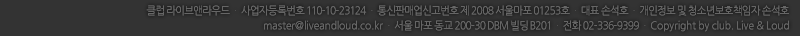
<style>
.page{position:relative;width:800px;height:36px;background:#333333}
.page>*{position:absolute;margin:0}
.t1{font:11px/15px "NanumGothic";letter-spacing:0.01em;color:#666666;scale:0.94 1}
.t2{font:11px/15px "NanumGothic";letter-spacing:-0.04em;color:#666666;scale:0.94 1}
.t3{font:11px/15px "NanumGothic";letter-spacing:-0.04em;color:#505050;scale:0.94 1}
</style>
<div class="page">
<p class="t1" style="left:146px;top:5px;width:643px;height:27px;text-align:right"><span class="t2">클럽 라이브앤라우드 </span><span class="t3">ㆍ </span><span class="t2">사업자등록번호 110-10-23124 </span><span class="t3">ㆍ</span><span class="t2"> 통신판매업신고번호 제 2008 서울마포 01253호 </span><span class="t3">ㆍ</span><span class="t2"> 대표 손석호 </span><span class="t3">ㆍ</span><span class="t2"> 개인정보 및 청소년보호책임자 손석호<br></span>master@liveandloud.co.kr <span class="t3">ㆍ</span><span class="t2"> 서울 마포 동교 200-30 DBM 빌딩 B201 </span><span class="t3">ㆍ</span><span class="t2"> 전화 02-336-9399 </span><span class="t3">ㆍ </span>Copyright by club. Live &amp; Loud</p>
</div>
